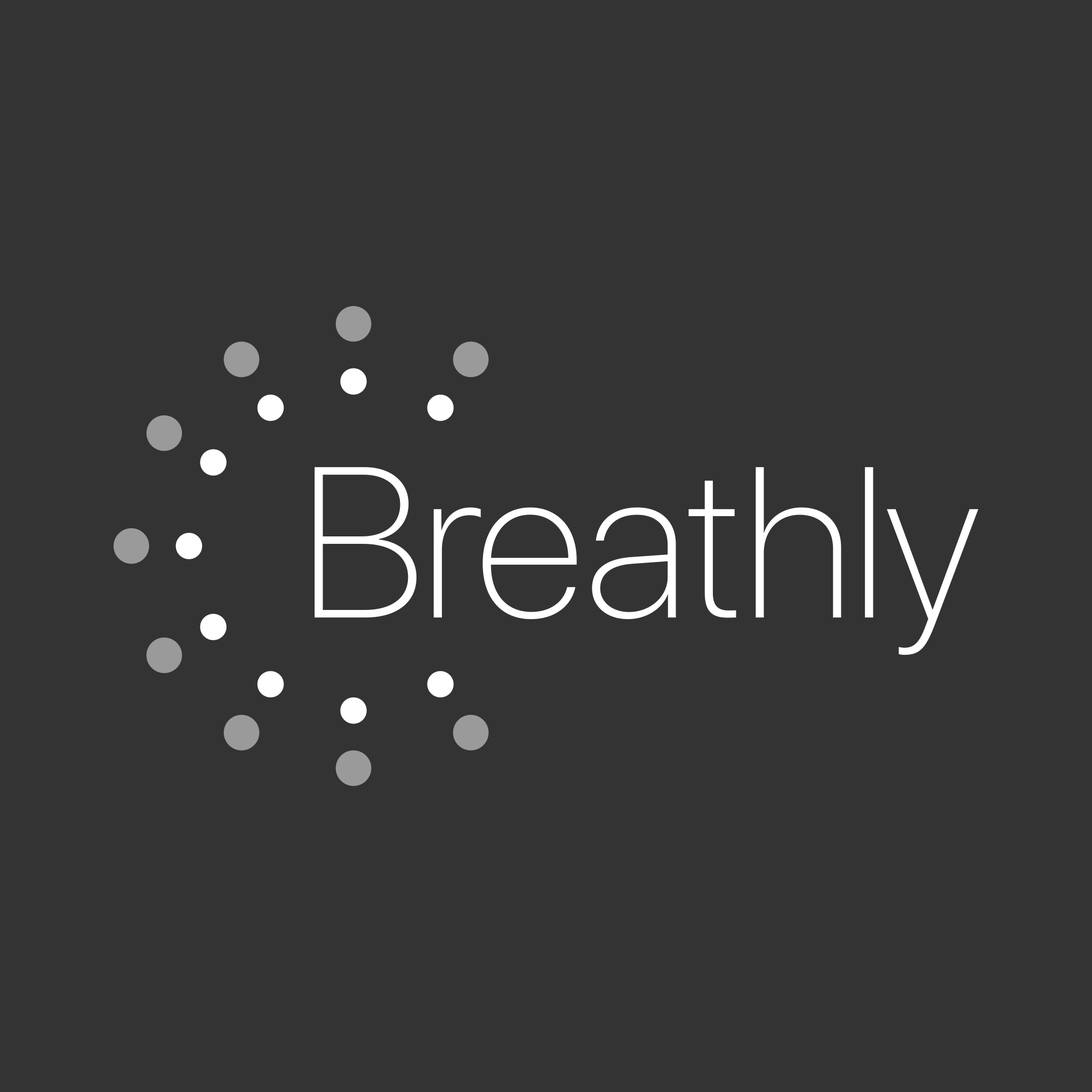
<style>
.page{position:relative;width:1092px;height:1092px;background:#333333}
.page>*{position:absolute;margin:0}
.t1{font:213.3px "SFProDisplay-Thin";color:#ffffff}
</style>
<div class="page">
<p class="t1" style="left:315px;top:467px;width:663px;height:188px">Breathly</p>
</div>
